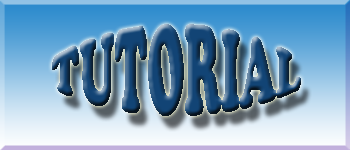
<style>
.page{position:relative;width:350px;height:150px}
.page>*{position:absolute;margin:0}
.t1{font:44px/38px "CooperBlack"}
</style>
<div class="page">
<p class="t1" style="left:52px;top:24px;width:249px;height:92px">TUTORIAL</p>
</div>
